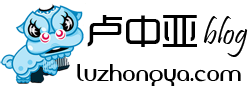
<style>
.page{position:relative;width:250px;height:88px;background:#ffffff}
.page>*{position:absolute;margin:0}
.t1{font:37.5px "TRENDS";color:#000000}
.t2{font:33.3px "Pristina-Regular";color:#000000}
.t3{font:22.5px "AmerikaSans";color:#000000}
</style>
<div class="page">
<p class="t1" style="left:87px;top:15px;width:110px;height:32px">卢中亚</p>
<p class="t2" style="left:203px;top:16px;width:45px;height:41px">blog</p>
<p class="t3" style="left:77px;top:64px;width:164px;height:22px">luzhongya.com</p>
</div>
